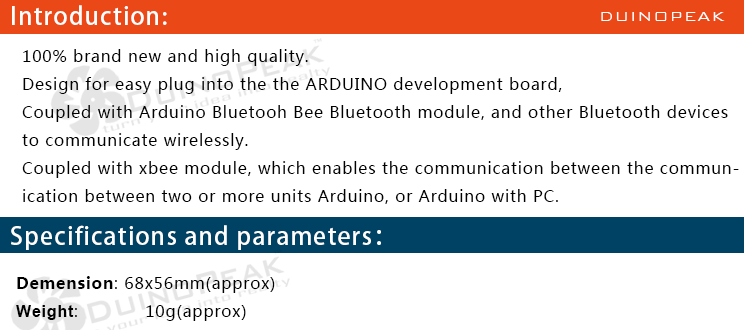
<style>
.page{position:relative;width:744px;height:330px;background:#ffffff}
.page>*{position:absolute;margin:0}
.t1{font:24px "AdobeHeitiStd-Regular";letter-spacing:0.05em;color:#ffffff}
.t2{font:18px "BankGothicBT-Light";letter-spacing:0.05em;color:#ffffff}
.t3{font:16px "MicrosoftYaHei";letter-spacing:0.05em;color:#000000}
.t4{font:16px "MicrosoftYaHei-Bold";letter-spacing:0.05em;color:#000000}
.t5{font:16px "Arial-BoldMT";letter-spacing:0.05em;color:#000000}
</style>
<div class="page">
<p class="t1" style="left:12px;top:5px;width:155px;height:20px">Introduction:</p>
<p class="t2" style="left:601px;top:12px;width:124px;height:9px">DUINOPEAK</p>
<p class="t3" style="left:22px;top:49px;width:717px;height:155px">100% brand new and high quality.<br>Design for easy plug into the the ARDUINO development board,<br>Coupled with Arduino Bluetooh Bee Bluetooth module, and other Bluetooth devices <br>to communicate wirelessly.<br>Coupled with xbee module, which enables the communication between the commun-<br>ication between two or more units Arduino, or Arduino with PC.</p>
<p class="t1" style="left:11px;top:225px;width:370px;height:25px">Specifications and parameters：</p>
<p class="t3" style="left:16px;top:276px;width:259px;height:45px"><span class="t4">Demension</span>: 68x56mm(approx)<br><span class="t5">Weight</span>:            10g(approx)</p>
</div>
